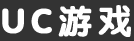
<style>
.page{position:relative;width:134px;height:41px;background:#333333}
.page>*{position:absolute;margin:0}
.t1{font:34px "JCuYuan";letter-spacing:0.15em;color:#ffffff;font-weight:bold}
</style>
<div class="page">
<p class="t1" style="left:2px;top:5px;width:129px;height:32px">UC游戏</p>
</div>
